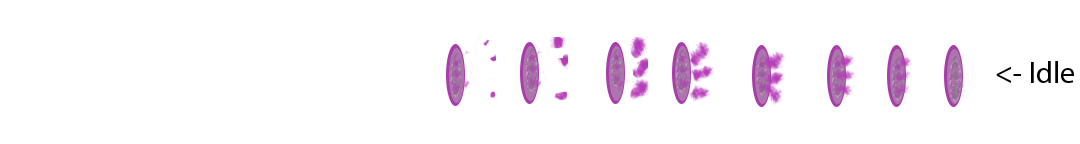
<style>
.page{position:relative;width:1080px;height:144px;background:#ffffff}
.page>*{position:absolute;margin:0}
.t1{font:12px "MyriadPro-Regular";color:#000000}
</style>
<div class="page">
<p class="t1" style="left:996px;top:61px;width:78px;height:22px">&lt;- Idle</p>
</div>
